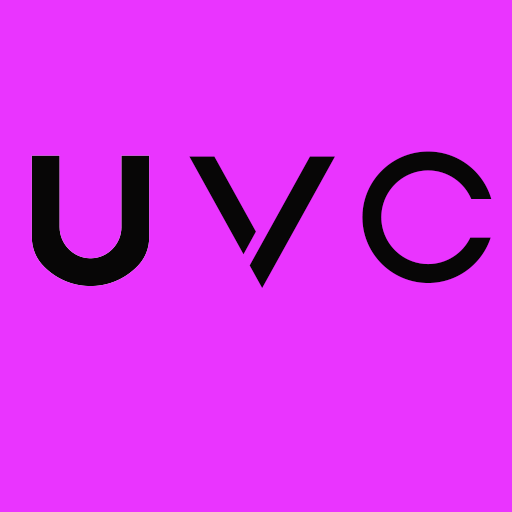
<style>
.page{position:relative;width:512px;height:512px;background:#ea34ff}
.page>*{position:absolute;margin:0}
.t1{font:197.2px "AquireRegular";color:#070606}
</style>
<div class="page">
<p class="t1" style="left:189px;top:156px;width:146px;height:132px">V</p>
<p class="t1" style="left:362px;top:151px;width:130px;height:132px">c</p>
</div>
